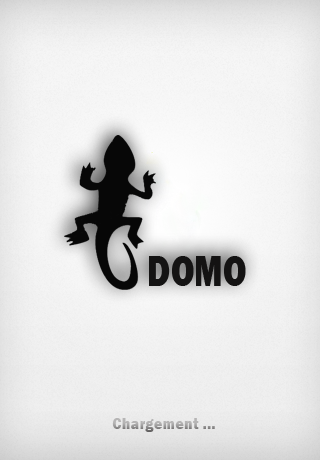
<style>
.page{position:relative;width:320px;height:460px}
.page>*{position:absolute;margin:0}
.t1{font:44.6px "FranklinGothic-Heavy";color:#141313;scale:0.77 1}
.t2{font:15.6px "FranklinGothic-Heavy";letter-spacing:0.025em;color:#b4b1b1;scale:0.92 1}
</style>
<div class="page">
<p class="t1" style="left:149px;top:256px;width:97px;height:30px">DOMO</p>
<p class="t2" style="left:112px;top:418px;width:103px;height:14px">Chargement ...</p>
</div>
